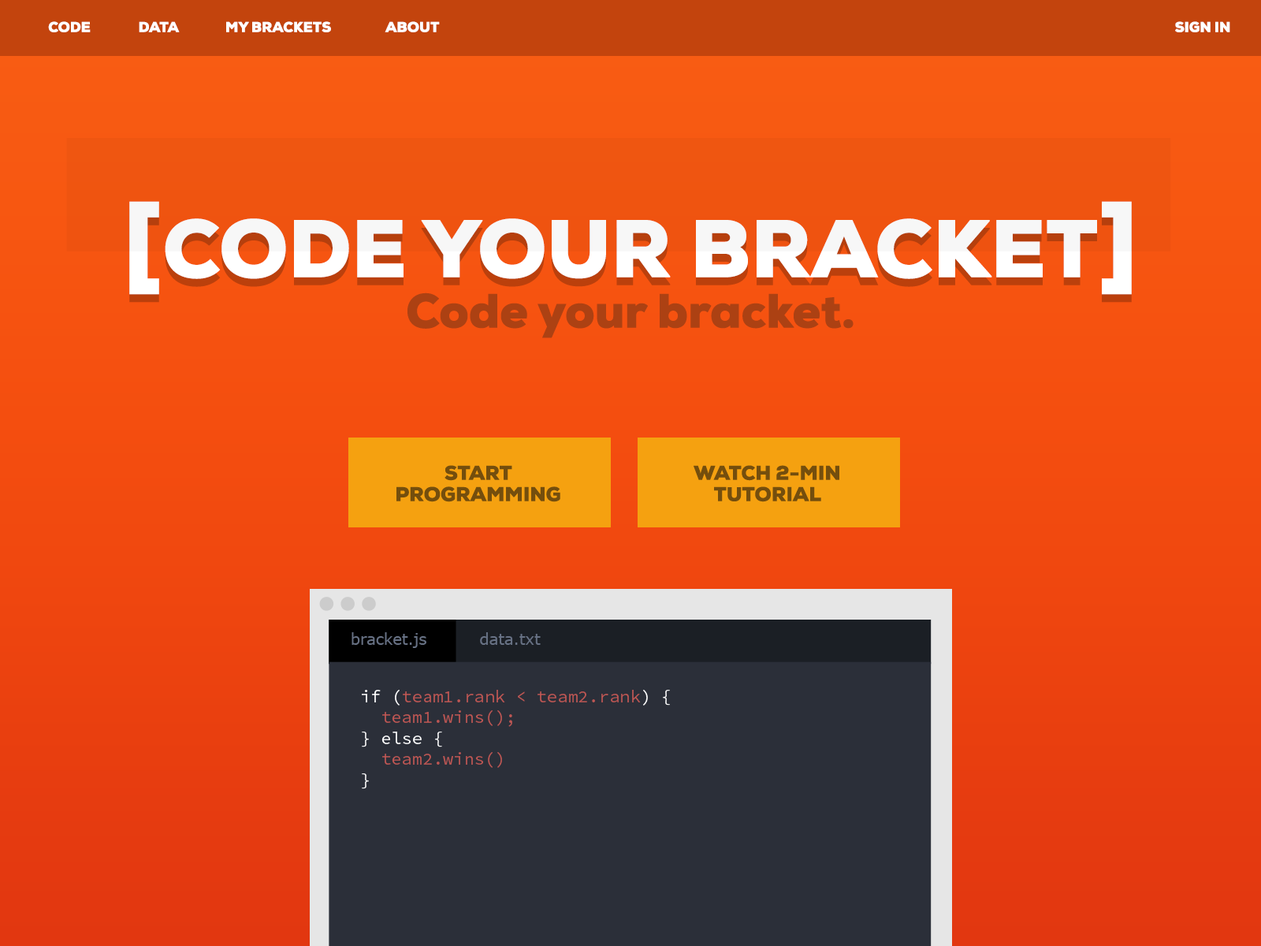
<style>
.page{position:relative;width:1261px;height:946px}
.page>*{position:absolute;margin:0}
.t1{font:14.2px "NexaBlack";color:#ffffff}
.t2{font:81.7px "NexaBlack";color:#ffffff}
.t3{font:107.4px "NexaBlack";color:#ffffff}
.t4{font:48.1px "NexaBlack";color:#ac4113}
.t5{font:19.8px/21.3px "NexaBlack";color:#744e0d}
</style>
<div class="page">
<p class="t1" style="left:48px;top:21px;width:43px;height:11px">CODE</p>
<p class="t1" style="left:139px;top:21px;width:41px;height:11px">DATA</p>
<p class="t1" style="left:226px;top:21px;width:105px;height:11px">MY BRACKETS</p>
<p class="t1" style="left:385px;top:21px;width:55px;height:11px">ABOUT</p>
<p class="t1" style="left:1175px;top:21px;width:55px;height:11px">SIGN IN</p>
<p class="t2" style="left:129px;top:201px;width:1003px;height:94px"><span class="t3">[</span>CODE YOUR BRACKET<span class="t3">]</span></p>
<p class="t4" style="left:407px;top:292px;width:446px;height:46px">Code your bracket.</p>
<p class="t5" style="left:396px;top:465px;width:164px;height:37px;text-align:center">START<br>PROGRAMMING</p>
<p class="t5" style="left:694px;top:465px;width:145px;height:37px;text-align:center">WATCH 2-MIN<br>TUTORIAL</p>
</div>
